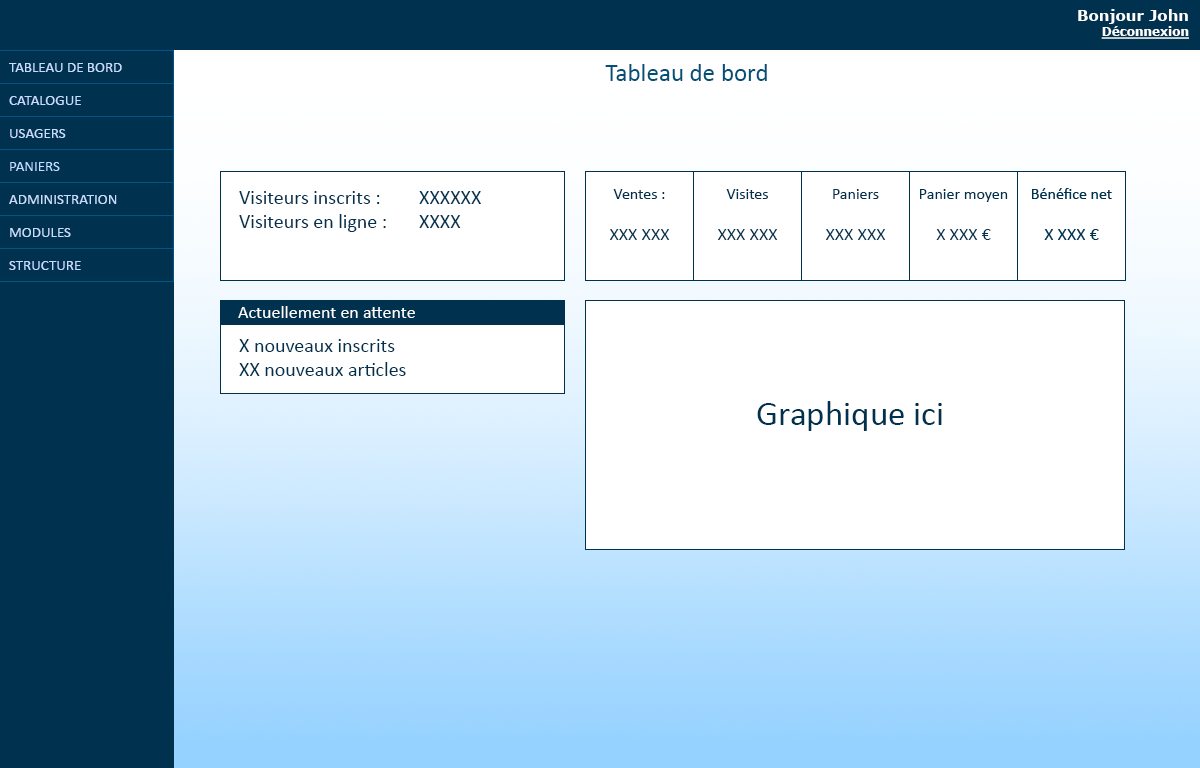
<style>
.page{position:relative;width:1200px;height:768px;background:#ffffff}
.page>*{position:absolute;margin:0}
.t1{font:15px "Verdana-Bold";color:#fefefe}
.t2{font:12px "Verdana-Bold";color:#fefefe;text-decoration:underline}
.t3{font:15px "Calibri";color:#c8dcff}
.t4{font:25px "Calibri";color:#005078}
.t5{font:20px "Calibri";color:#003250}
.t6{font:16px "Calibri";color:#003250}
.t7{font:18px "Calibri";color:#003250}
.t8{font:18px "Calibri";color:#ffffff}
.t9{font:35px "Calibri";color:#003250}
</style>
<div class="page">
<p class="t1" style="left:1078px;top:9px;width:111px;height:30px;text-align:right">Bonjour John<br><span class="t2">Déconnexion</span></p>
<p class="t3" style="left:9px;top:63px;width:113px;height:9px">TABLEAU DE BORD</p>
<p class="t4" style="left:605px;top:64px;width:162px;height:17px">Tableau de bord</p>
<p class="t3" style="left:9px;top:96px;width:72px;height:9px">CATALOGUE</p>
<p class="t3" style="left:10px;top:129px;width:56px;height:9px">USAGERS</p>
<p class="t3" style="left:9px;top:195px;width:108px;height:9px">ADMINISTRATION</p>
<p class="t5" style="left:239px;top:191px;width:242px;height:41px">Visiteurs inscrits :  XXXXXX<br>Visiteurs en ligne :  XXXX</p>
<p class="t6" style="left:610px;top:189px;width:60px;height:51px;text-align:center">Ventes :<br><br><span class="t7">XXX XXX</span></p>
<p class="t6" style="left:718px;top:189px;width:60px;height:51px;text-align:center">Visites<br><br><span class="t7">XXX XXX</span></p>
<p class="t6" style="left:826px;top:189px;width:60px;height:51px;text-align:center">Paniers<br><br><span class="t7">XXX XXX</span></p>
<p class="t6" style="left:920px;top:189px;width:88px;height:51px;text-align:center">Panier moyen<br><br><span class="t7">X XXX €</span></p>
<p class="t3" style="left:10px;top:228px;width:61px;height:9px">MODULES</p>
<p class="t3" style="left:9px;top:261px;width:72px;height:9px">STRUCTURE</p>
<p class="t8" style="left:238px;top:306px;width:177px;height:12px">Actuellement en attente</p>
<p class="t5" style="left:239px;top:339px;width:167px;height:37px">X nouveaux inscrits<br>XX nouveaux articles</p>
<p class="t9" style="left:757px;top:401px;width:185px;height:30px">Graphique ici</p>
</div>
